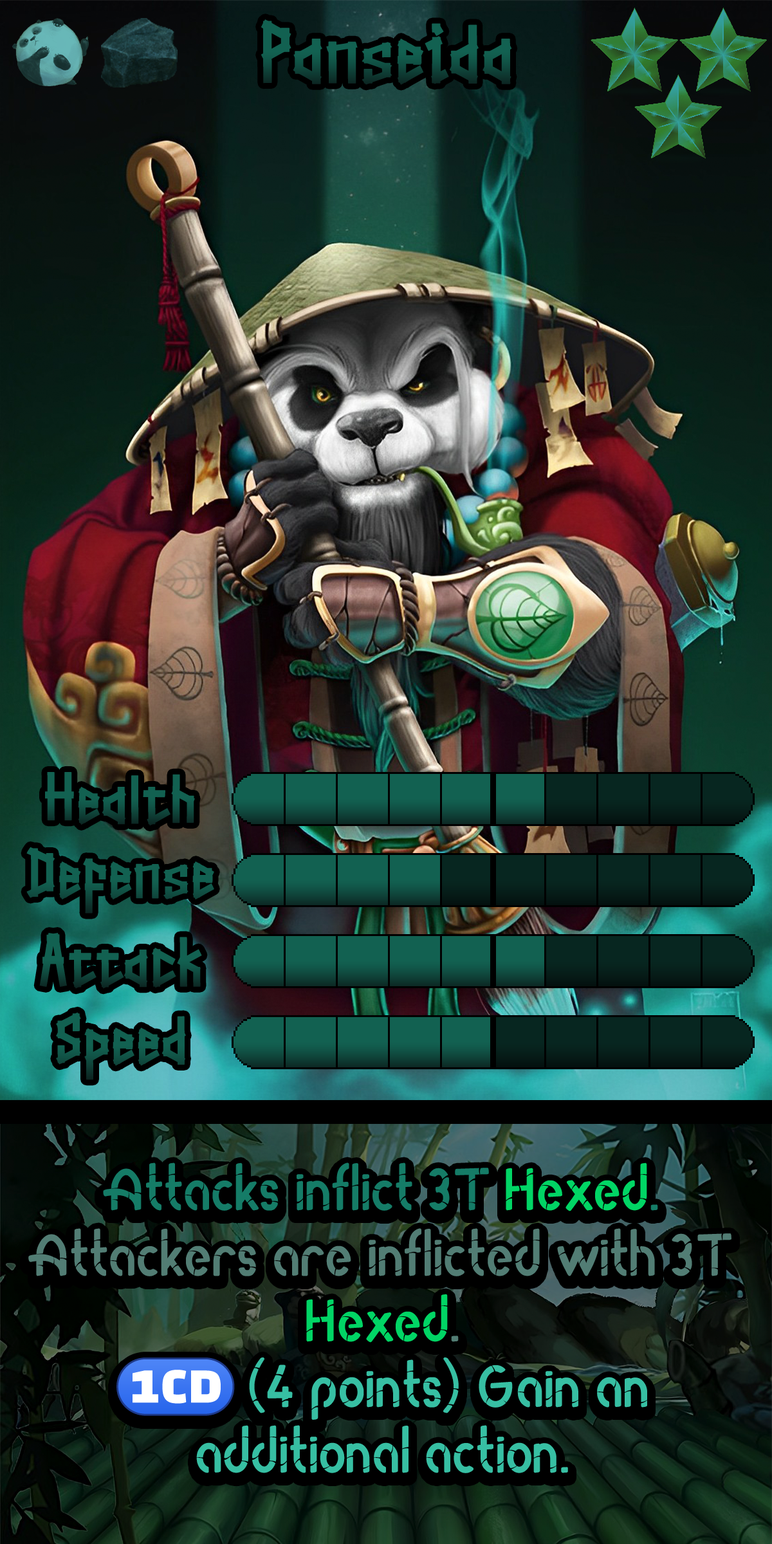
<style>
.page{position:relative;width:772px;height:1544px}
.page>*{position:absolute;margin:0}
.t1{font:156.4px "Straightwell";color:#11594b}
.t2{font:128.7px "Straightwell";color:#115b4d}
.t3{font:128.7px "Straightwell";color:#126151}
.t4{font:101.7px/65.6px "RodaBamboo";color:#37bfa3}
.t5{font:101.7px/65.6px "RodaBamboo";color:#157c67}
.t6{font:101.7px/65.6px "RodaBamboo";color:#01d565}
.t7{font:101.7px/65.6px "RodaBamboo";color:#527d74}
.t8{font:101.7px/65.6px "stoogedings-Regular";letter-spacing:0.24em;color:#37bfa3}
</style>
<div class="page">
<p class="t1" style="left:261px;top:19px;width:251px;height:66px">Panseida</p>
<p class="t2" style="left:45px;top:772px;width:150px;height:54px">Health</p>
<p class="t3" style="left:26px;top:847px;width:188px;height:67px">Defense</p>
<p class="t4" style="left:28px;top:1163px;width:704px;height:311px;text-align:center"><span class="t5">Attacks inflict 3T </span><span class="t6">Hexed</span><span class="t5">. <br></span><span class="t7">Attackers are inflicted with 3T </span><span class="t6">Hexed</span><span class="t7">.<br></span><span class="t8">(1CD)</span>(4 points) Gain an additional action.</p>
</div>
